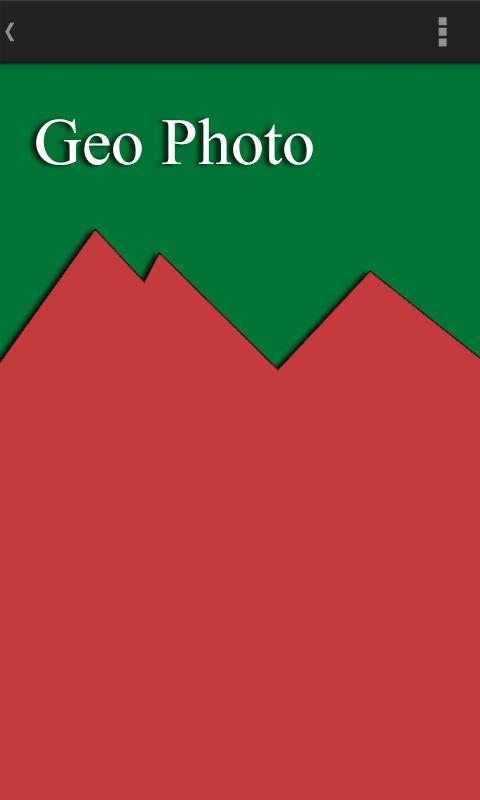
<style>
.page{position:relative;width:480px;height:800px;background:#c33b3b}
.page>*{position:absolute;margin:0}
.t1{font:80px "ShonarBangla";color:#ffffff}
</style>
<div class="page">
<p class="t1" style="left:36px;top:118px;width:277px;height:47px">Geo Photo</p>
</div>
